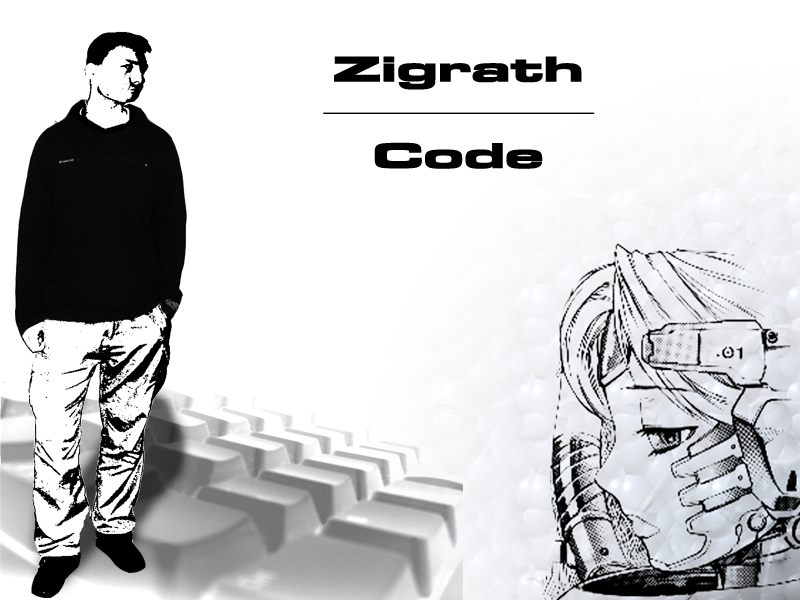
<style>
.page{position:relative;width:800px;height:600px;background:#ffffff}
.page>*{position:absolute;margin:0}
.t1{font:36px "MicrogrammaD-BoldExte";color:#000000;font-weight:bold;scale:1.5 1}
</style>
<div class="page">
<p class="t1" style="left:334px;top:56px;width:248px;height:113px;text-align:center">Zigrath<br><br>Code</p>
</div>
